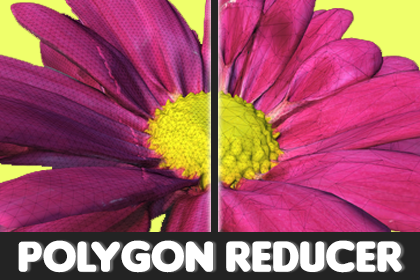
<style>
.page{position:relative;width:420px;height:280px}
.page>*{position:absolute;margin:0}
.t1{font:46px "Insaniburger";color:#ffffff}
</style>
<div class="page">
<p class="t1" style="left:18px;top:240px;width:384px;height:33px">POLYGON REDUCER</p>
</div>
